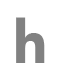
<style>
.page{position:relative;width:60px;height:80px;background:#ffffff}
.page>*{position:absolute;margin:0}
.t1{font:60px "Avenir-Black";color:#818181}
</style>
<div class="page">
<p class="t1" style="left:16px;top:17px;width:29px;height:46px">h</p>
</div>
